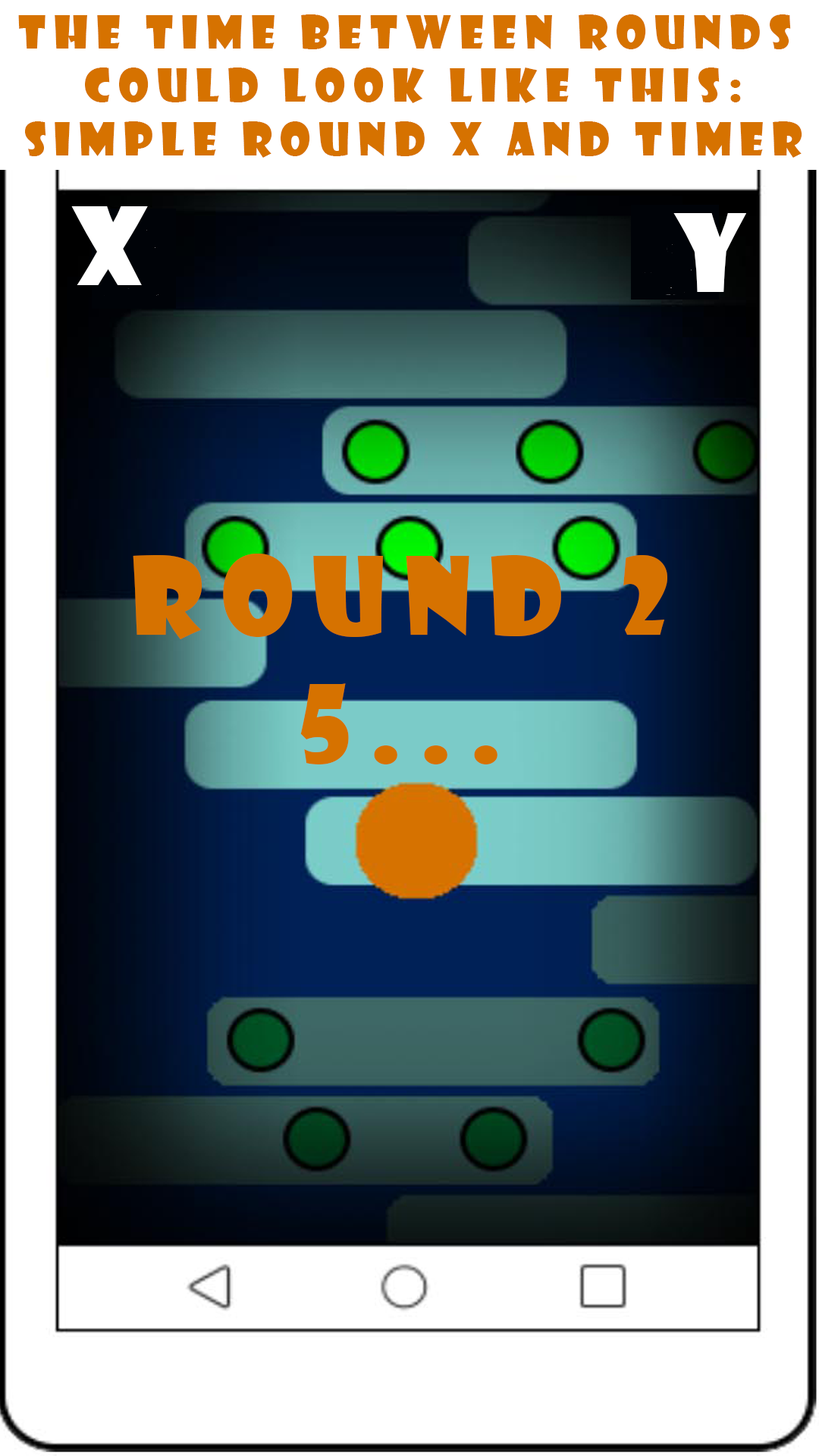
<style>
.page{position:relative;width:819px;height:1456px;background:#ffffff}
.page>*{position:absolute;margin:0}
.t1{font:44.3px "ShowcardGothic-Reg";letter-spacing:0.18em;color:#d67200}
.t2{font:104.3px "ShowcardGothic-Reg";letter-spacing:0.18em;color:#ffffff}
.t3{font:104.3px "ShowcardGothic-Reg";letter-spacing:0.18em;color:#d67200}
</style>
<div class="page">
<p class="t1" style="left:18px;top:14px;width:784px;height:144px;text-align:center">The time between Rounds <br>could look like this:<br>Simple round x and timer</p>
<p class="t2" style="left:71px;top:206px;width:77px;height:79px">x</p>
<p class="t2" style="left:673px;top:213px;width:74px;height:79px">y</p>
<p class="t3" style="left:133px;top:554px;width:534px;height:85px">Round 2</p>
<p class="t3" style="left:300px;top:683px;width:197px;height:81px">5...</p>
</div>
